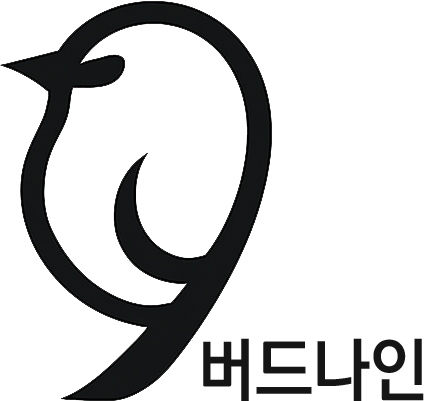
<style>
.page{position:relative;width:424px;height:401px;background:#ffffff}
.page>*{position:absolute;margin:0}
.t1{font:70px "KoPubWorldDotumPB";letter-spacing:-0.005em;color:#151516;scale:0.95 1}
</style>
<div class="page">
<p class="t1" style="left:203px;top:338px;width:221px;height:64px">버드나인</p>
</div>
